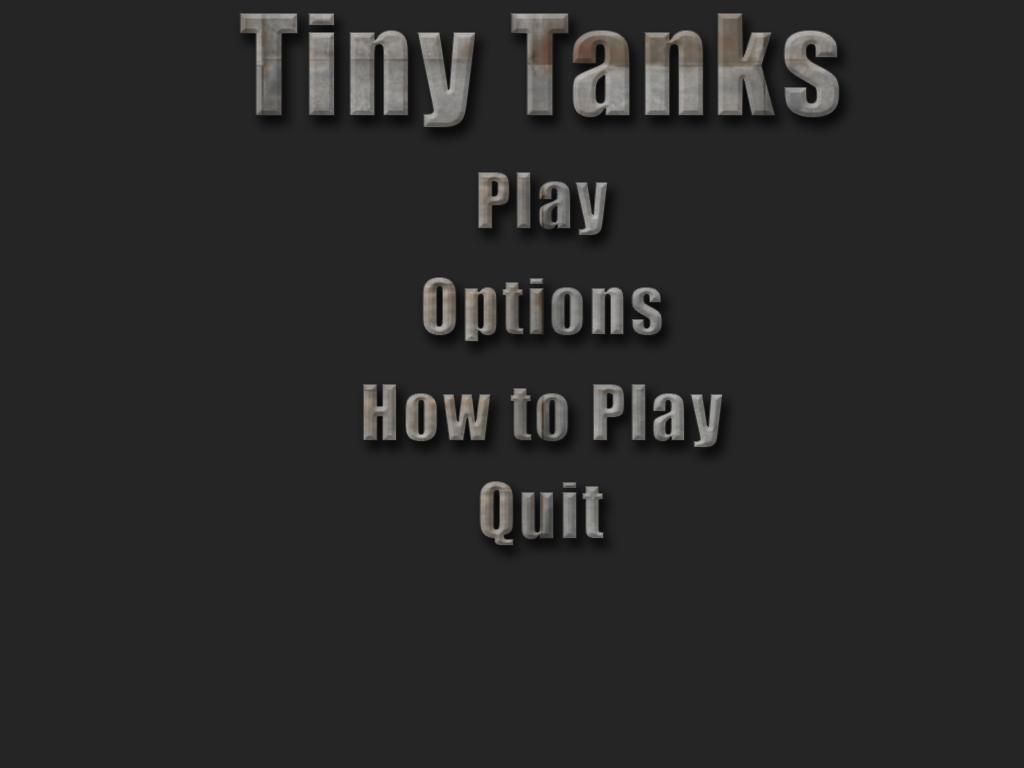
<style>
.page{position:relative;width:1024px;height:768px;background:#252525}
.page>*{position:absolute;margin:0}
.t1{font:129.7px "Impact";letter-spacing:0.04em}
.t2{font:71.8px "Impact";letter-spacing:0.04em}
</style>
<div class="page">
<p class="t1" style="left:239px;top:13px;width:601px;height:115px">Tiny Tanks</p>
<p class="t2" style="left:477px;top:172px;width:132px;height:64px">Play</p>
<p class="t2" style="left:422px;top:277px;width:241px;height:65px">Options</p>
<p class="t2" style="left:362px;top:384px;width:362px;height:64px">How to Play</p>
<p class="t2" style="left:479px;top:481px;width:126px;height:65px">Quit</p>
</div>
